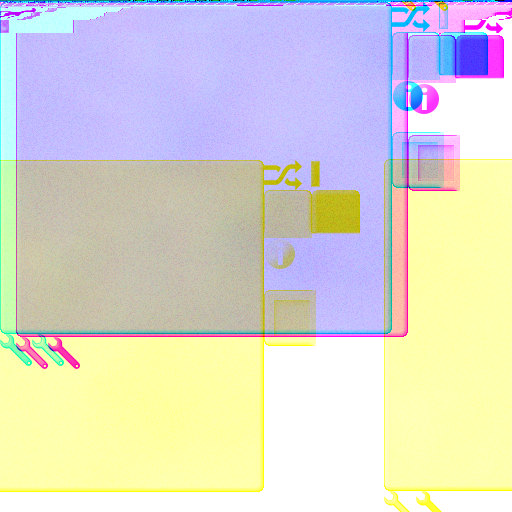
<style>
.page{position:relative;width:512px;height:512px}
.page>*{position:absolute;margin:0}
.t1{font:30px "MyanmarText-Bold";letter-spacing:0.06em}
</style>
<div class="page">
<p class="t1" style="left:405px;top:82px;width:7px;height:23px">i</p>
</div>
